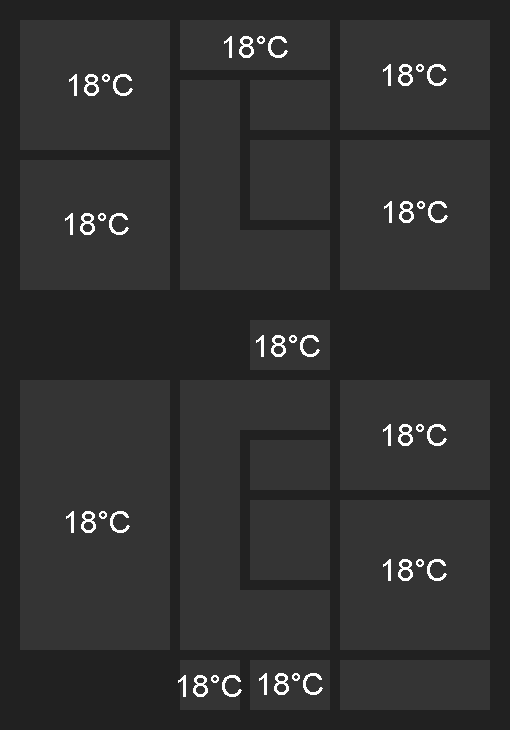
<style>
.page{position:relative;width:510px;height:730px;background:#343434}
.page>*{position:absolute;margin:0}
.t1{font:30px "ArialMT";color:#ffffff}
</style>
<div class="page">
<p class="t1" style="left:224px;top:36px;width:64px;height:22px">18°C</p>
<p class="t1" style="left:383px;top:64px;width:64px;height:22px">18°C</p>
<p class="t1" style="left:69px;top:74px;width:64px;height:22px">18°C</p>
<p class="t1" style="left:384px;top:201px;width:64px;height:22px">18°C</p>
<p class="t1" style="left:65px;top:213px;width:64px;height:22px">18°C</p>
<p class="t1" style="left:256px;top:335px;width:64px;height:22px">18°C</p>
<p class="t1" style="left:383px;top:424px;width:64px;height:22px">18°C</p>
<p class="t1" style="left:66px;top:511px;width:64px;height:22px">18°C</p>
<p class="t1" style="left:383px;top:559px;width:64px;height:22px">18°C</p>
<p class="t1" style="left:178px;top:675px;width:64px;height:22px">18°C</p>
<p class="t1" style="left:259px;top:673px;width:64px;height:22px">18°C</p>
</div>
